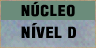
<style>
.page{position:relative;width:96px;height:48px;background:#6b8c7b}
.page>*{position:absolute;margin:0}
.t1{font:14.7px "HelveticaLT-Condensed-Black";letter-spacing:0.04em;color:#000000;scale:1.1 1}
.t2{font:15.5px "HelveticaLT-Condensed-Black";letter-spacing:0.05em;color:#000000;scale:1.1 1}
</style>
<div class="page">
<p class="t1" style="left:21px;top:1px;width:54px;height:16px">NÚCLEO</p>
<p class="t2" style="left:21px;top:23px;width:58px;height:16px">NÍVEL D</p>
</div>
